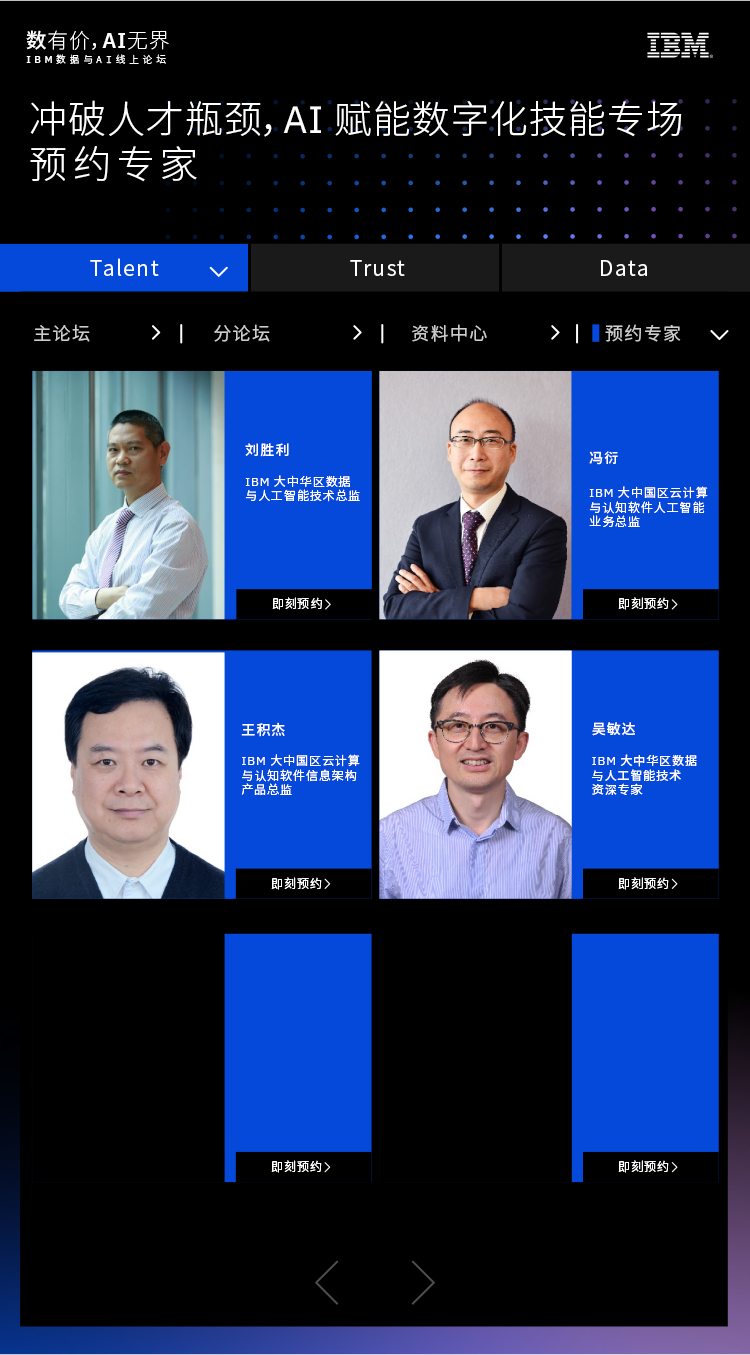
<style>
.page{position:relative;width:750px;height:1355px;background:#000000}
.page>*{position:absolute;margin:0}
.t1{font:20.7px "NotoSansCJKsc-Thin";letter-spacing:0.05em;color:#ffffff}
.t2{font:20.7px "NotoSansCJKsc-Medium";letter-spacing:0.05em;color:#ffffff}
.t3{font:20.7px "NotoSansCJKsc-Light";letter-spacing:0.05em;color:#ffffff}
.t4{font:20.7px "IBMPlexSans-SemiBold";letter-spacing:0.05em;color:#ffffff}
.t5{font:9.8px "NotoSansCJKsc-Light";letter-spacing:0.37em;color:#ffffff}
.t6{font:9.8px "IBMPlexSans-Medium";letter-spacing:0.37em;color:#ffffff}
.t7{font:9.8px "IBMPlexMono-Light";letter-spacing:0.37em;color:#ffffff}
.t8{font:38px "NotoSansCJKsc-Light";letter-spacing:0.025em;color:#ffffff}
.t9{font:38px "IBMPlexSans";letter-spacing:0.025em;color:#ffffff}
.t10{font:38px "NotoSansCJKsc-Light";letter-spacing:0.15em;color:#ffffff}
.t11{font:21px "NotoSansCJKsc-DemiLight";letter-spacing:0.075em;color:#ffffff}
.t12{font:18px "NotoSansCJKsc-DemiLight";letter-spacing:0.075em;color:#cccccc}
.t13{font:14px "NotoSansCJKsc-Medium";letter-spacing:0.075em;color:#ffffff}
.t14{font:12px "NotoSansCJKsc-DemiLight";letter-spacing:0.075em;color:#ffffff}
.t15{font:12px "IBMPlexSans";letter-spacing:0.075em;color:#ffffff}
.t16{font:12px "NotoSansCJKsc-Regular";letter-spacing:0.075em;color:#ffffff}
</style>
<div class="page">
<p class="t1" style="left:26px;top:30px;width:143px;height:20px"><span class="t2">数</span>有价<span class="t3">，</span><span class="t4">AI</span>无界</p>
<p class="t5" style="left:26px;top:54px;width:140px;height:10px"><span class="t6">IBM</span>数据与<span class="t7">AI</span>线上论坛</p>
<p class="t8" style="left:30px;top:100px;width:652px;height:37px">冲破人才瓶颈，<span class="t9">AI </span>赋能数字化技能专场</p>
<p class="t10" style="left:30px;top:146px;width:167px;height:36px">预约专家</p>
<p class="t11" style="left:90px;top:258px;width:69px;height:18px">Talent</p>
<p class="t11" style="left:350px;top:260px;width:55px;height:16px">Trust</p>
<p class="t11" style="left:601px;top:260px;width:46px;height:16px">Data</p>
<p class="t12" style="left:34px;top:324px;width:56px;height:18px">主论坛</p>
<p class="t12" style="left:214px;top:324px;width:56px;height:18px">分论坛</p>
<p class="t12" style="left:412px;top:324px;width:75px;height:18px">资料中心</p>
<p class="t12" style="left:605px;top:324px;width:76px;height:18px">预约专家</p>
<p class="t13" style="left:245px;top:443px;width:44px;height:14px">刘胜利</p>
<p class="t13" style="left:589px;top:451px;width:29px;height:14px">冯衍</p>
<p class="t14" style="left:245px;top:475px;width:115px;height:27px"><span class="t15">IBM</span> 大中华区数据<br>与人工智能技术总监</p>
<p class="t14" style="left:589px;top:486px;width:119px;height:41px"><span class="t15">IBM </span>大中国区云计算<br>与认知软件人工智能<br>业务总监</p>
<p class="t14" style="left:272px;top:597px;width:50px;height:13px">即刻预约</p>
<p class="t14" style="left:618px;top:597px;width:51px;height:13px">即刻预约</p>
<p class="t13" style="left:241px;top:722px;width:44px;height:15px">王积杰</p>
<p class="t13" style="left:592px;top:722px;width:43px;height:14px">吴敏达</p>
<p class="t14" style="left:241px;top:754px;width:119px;height:41px"><span class="t15">IBM </span>大中国区云计算<br>与认知软件信息架构<br>产品总监</p>
<p class="t16" style="left:592px;top:754px;width:105px;height:41px"><span class="t15">IBM</span> 大中华区数据<br>与人工智能技术<br>资深专家</p>
<p class="t14" style="left:271px;top:877px;width:51px;height:13px">即刻预约</p>
<p class="t14" style="left:618px;top:877px;width:51px;height:13px">即刻预约</p>
<p class="t14" style="left:271px;top:1160px;width:51px;height:13px">即刻预约</p>
<p class="t14" style="left:618px;top:1160px;width:51px;height:13px">即刻预约</p>
</div>
